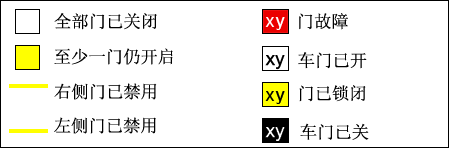
<style>
.page{position:relative;width:449px;height:148px;background:#ffffff}
.page>*{position:absolute;margin:0}
.t1{font:17.3px "SimSun";color:#000000}
</style>
<div class="page">
<p class="t1" style="left:54px;top:13px;width:103px;height:17px">全部门已关闭</p>
<p class="t1" style="left:299px;top:13px;width:49px;height:17px">门故障</p>
<p class="t1" style="left:54px;top:48px;width:119px;height:17px">至少一门仍开启</p>
<p class="t1" style="left:298px;top:52px;width:69px;height:17px">车门已开</p>
<p class="t1" style="left:54px;top:83px;width:103px;height:17px">右侧门已禁用</p>
<p class="t1" style="left:299px;top:85px;width:67px;height:17px">门已锁闭</p>
<p class="t1" style="left:54px;top:117px;width:102px;height:17px">左侧门已禁用</p>
<p class="t1" style="left:300px;top:123px;width:69px;height:17px">车门已关</p>
</div>
